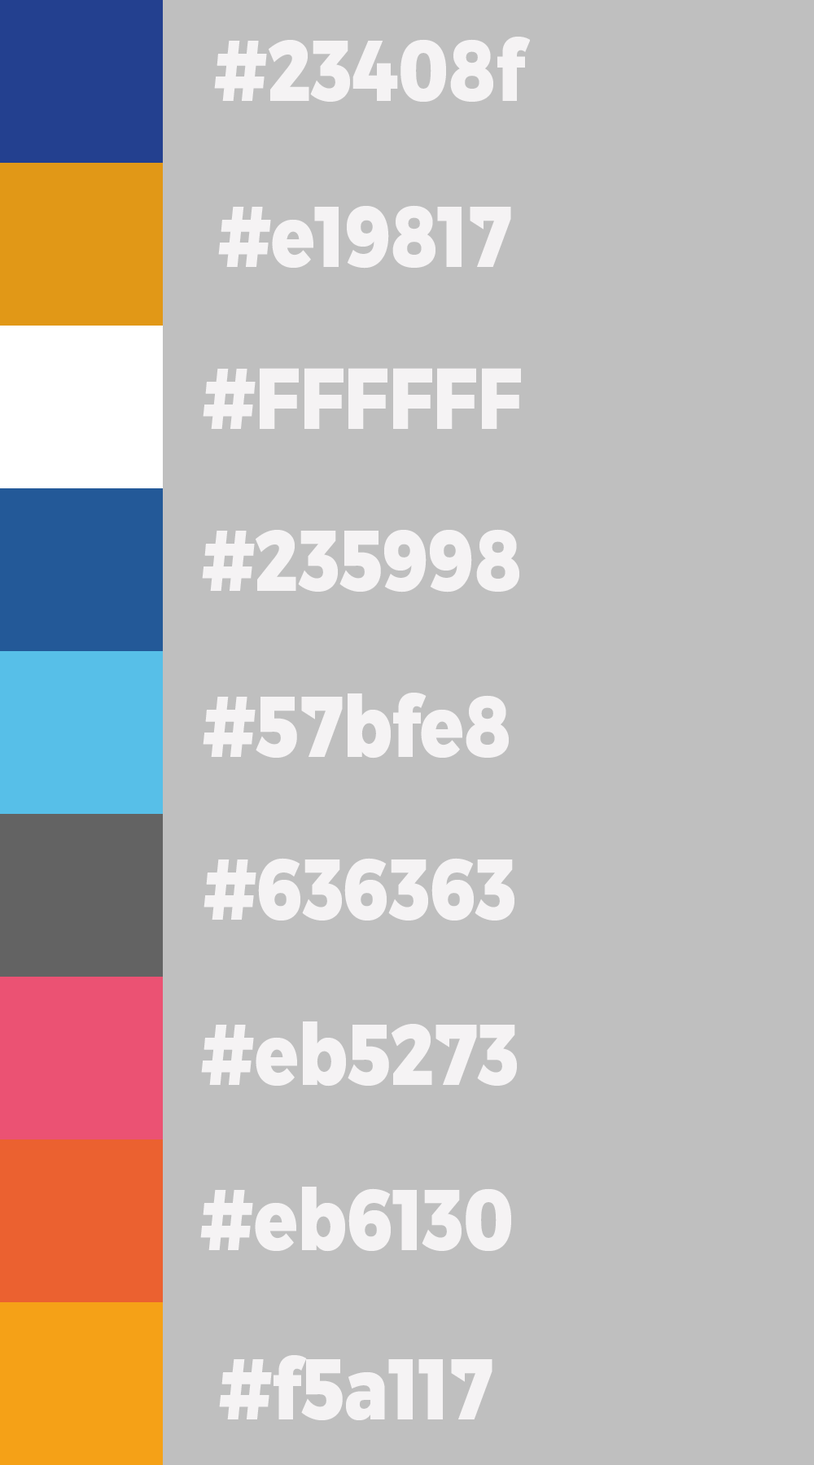
<style>
.page{position:relative;width:814px;height:1465px;background:#bfbfbf}
.page>*{position:absolute;margin:0}
.t1{font:85.9px "TruenoExBd";color:#f5f3f4;scale:0.83 1}
</style>
<div class="page">
<p class="t1" style="left:214px;top:37px;width:316px;height:65px">#23408f</p>
<p class="t1" style="left:218px;top:205px;width:293px;height:64px">#e19817</p>
<p class="t1" style="left:203px;top:368px;width:318px;height:61px">#FFFFFF</p>
<p class="t1" style="left:202px;top:529px;width:317px;height:64px">#235998</p>
<p class="t1" style="left:203px;top:693px;width:306px;height:66px">#57bfe8</p>
<p class="t1" style="left:203px;top:858px;width:311px;height:63px">#636363</p>
<p class="t1" style="left:201px;top:1021px;width:316px;height:66px">#eb5273</p>
<p class="t1" style="left:200px;top:1187px;width:311px;height:65px">#eb6130</p>
<p class="t1" style="left:219px;top:1355px;width:273px;height:65px">#f5a117</p>
</div>
